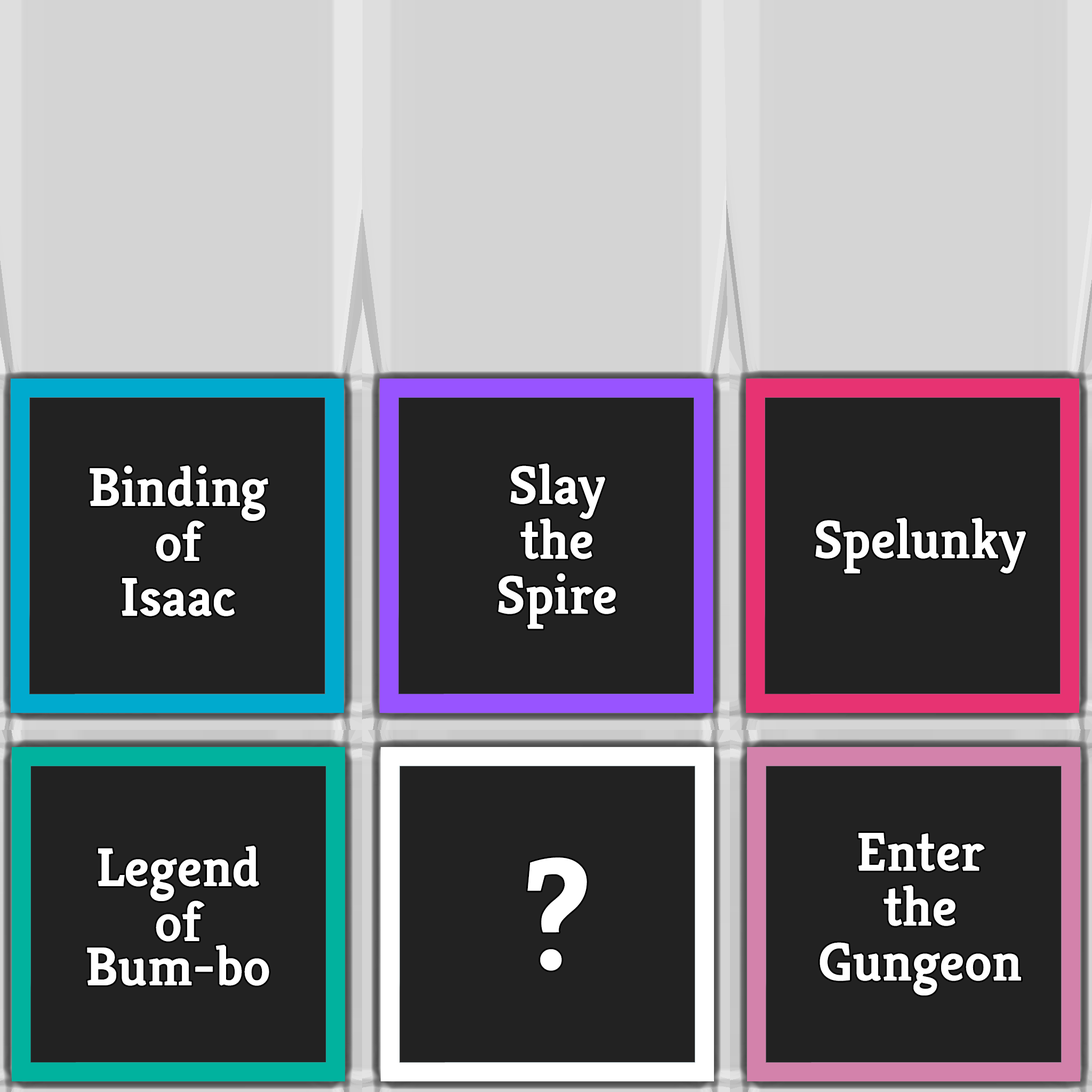
<style>
.page{position:relative;width:1092px;height:1092px;background:#222222}
.page>*{position:absolute;margin:0}
.t1{font:54.8px/11px "Kreon-Bold";color:#ffffff}
.t2{font:54.8px "Kreon-Bold";color:#ffffff}
.t3{font:160px "Kreon-Bold";color:#ffffff}
</style>
<div class="page">
<p class="t1" style="left:90px;top:465px;width:178px;height:151px;text-align:center">Binding<br><br><br><br><br>of<br><br><br><br><br>Isaac</p>
<p class="t1" style="left:498px;top:463px;width:118px;height:166px;text-align:center">Slay<br><br><br><br><br>the<br><br><br><br><br>Spire</p>
<p class="t2" style="left:815px;top:518px;width:211px;height:56px">Spelunky</p>
<p class="t1" style="left:820px;top:833px;width:201px;height:162px;text-align:center">Enter<br><br><br><br><br>the<br><br><br><br><br>Gungeon</p>
<p class="t1" style="left:87px;top:846px;width:182px;height:140px;text-align:center">Legend<br><br><br><br><br>of<br><br><br><br>Bum-bo</p>
<p class="t3" style="left:527px;top:857px;width:60px;height:114px">?</p>
</div>
